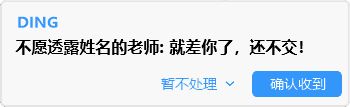
<style>
.page{position:relative;width:350px;height:107px;background:#f8f8f8}
.page>*{position:absolute;margin:0}
.t1{font:16px "MicrosoftYaHei-Bold";color:#000000}
</style>
<div class="page">
<p class="t1" style="left:15px;top:39px;width:288px;height:16px">不愿透露姓名的老师: 就差你了，还不交！</p>
</div>
